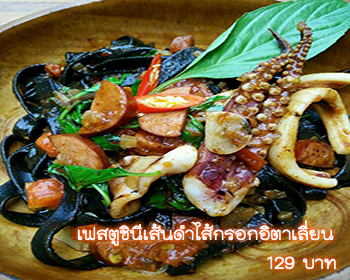
<style>
.page{position:relative;width:350px;height:280px}
.page>*{position:absolute;margin:0}
.t1{font:24px "THKodchasal";color:#ffffff}
</style>
<div class="page">
<p class="t1" style="left:77px;top:220px;width:259px;height:50px;text-align:right">เฟสตูชินีเส้นดำไส้กรอกอิตาเลี่ยน<br>บาท 129</p>
</div>
